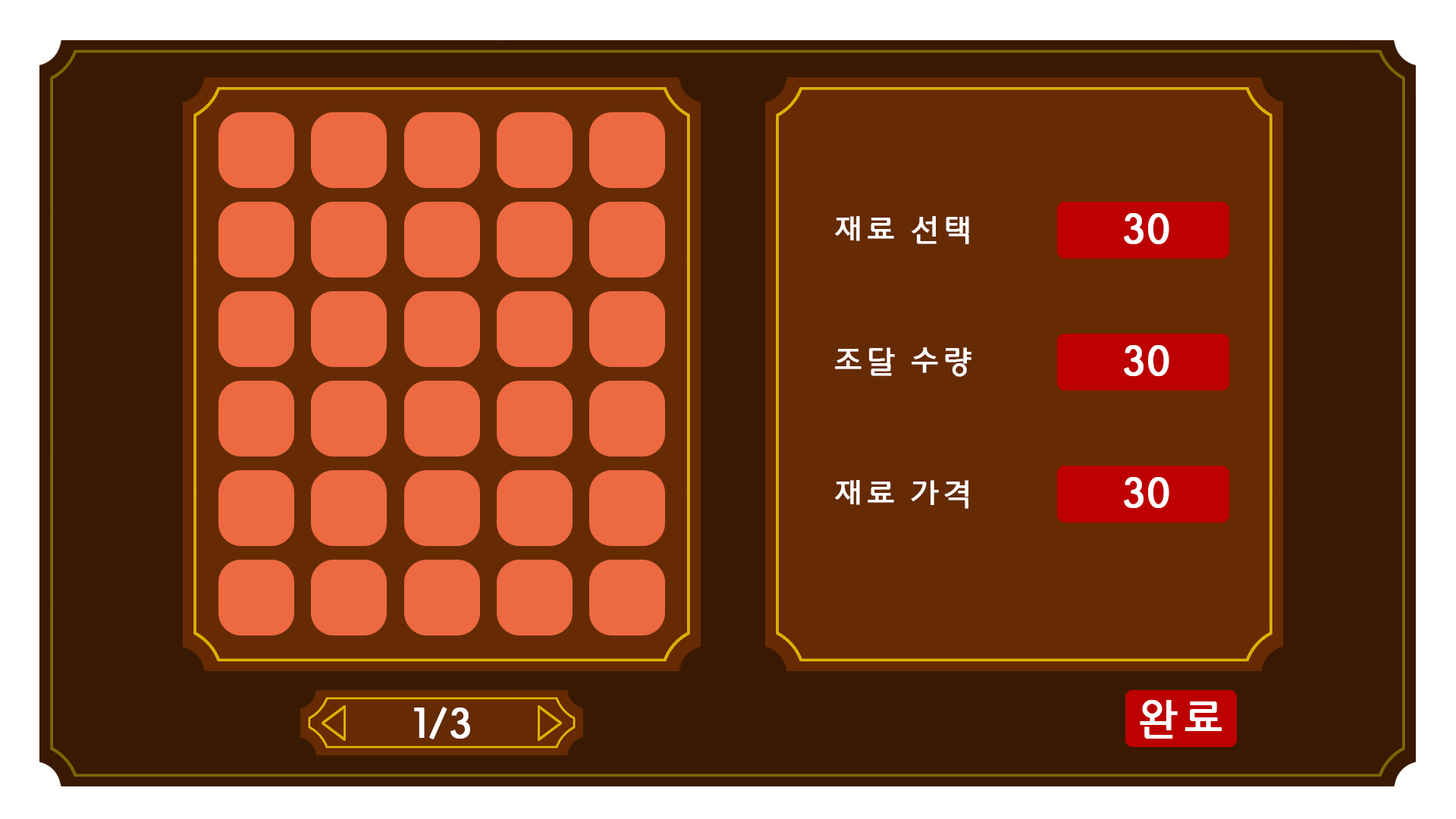
<style>
.page{position:relative;width:1456px;height:819px;background:#662b03}
.page>*{position:absolute;margin:0}
.t1{font:31.6px "HYkanM";color:#ffffff;font-weight:bold}
.t2{font:44.2px "HYkanM";color:#ffffff;font-weight:bold}
</style>
<div class="page">
<p class="t1" style="left:835px;top:216px;width:134px;height:28px">재료 선택</p>
<p class="t2" style="left:1124px;top:213px;width:45px;height:31px">30</p>
<p class="t1" style="left:835px;top:347px;width:136px;height:30px">조달 수량</p>
<p class="t2" style="left:1124px;top:345px;width:45px;height:31px">30</p>
<p class="t1" style="left:835px;top:480px;width:133px;height:29px">재료 가격</p>
<p class="t2" style="left:1124px;top:477px;width:45px;height:31px">30</p>
<p class="t2" style="left:1140px;top:700px;width:82px;height:39px">완료</p>
<p class="t2" style="left:1140px;top:700px;width:82px;height:39px">완료</p>
<p class="t2" style="left:414px;top:707px;width:56px;height:32px">1/3</p>
</div>
